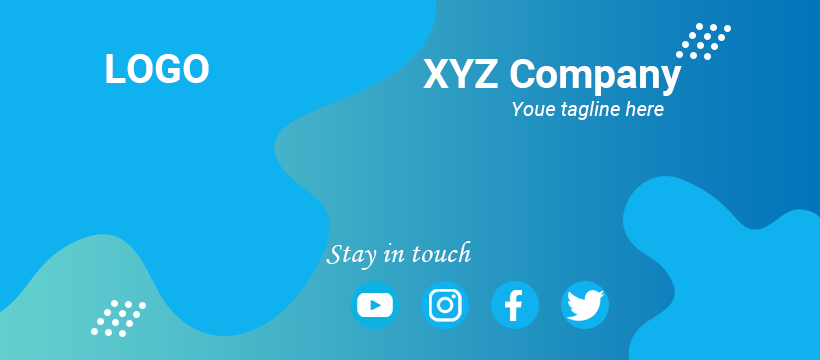
<style>
.page{position:relative;width:820px;height:360px;background:#0fb2ef}
.page>*{position:absolute;margin:0}
.t1{font:40.6px "Roboto-Bold";color:#ffffff}
.t2{font:20.3px "Roboto-Italic";color:#ffffff}
.t3{font:30.5px "MonotypeCorsiva";color:#ffffff}
</style>
<div class="page">
<p class="t1" style="left:106px;top:54px;width:103px;height:29px">LOGO</p>
<p class="t1" style="left:423px;top:59px;width:259px;height:37px">XYZ Company</p>
<p class="t2" style="left:512px;top:101px;width:152px;height:19px">Youe tagline here</p>
<p class="t3" style="left:326px;top:241px;width:145px;height:29px">Stay in touch</p>
</div>
